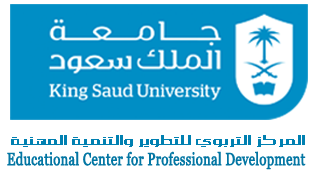
<style>
.page{position:relative;width:320px;height:180px;background:#ffffff}
.page>*{position:absolute;margin:0}
.t1{font:13.7px "LineMeskArabic2014";color:#0080b1;font-weight:bold;scale:1.45 1}
.t2{font:17.4px "Georgia";color:#0376a3;font-weight:bold;scale:0.74 1}
</style>
<div class="page">
<p class="t1" style="left:11px;top:135px;width:294px;height:12px">المركز التربوي للتطوير والتنمية المهنية</p>
<p class="t2" style="left:7px;top:151px;width:299px;height:19px">Educational Center for Professional Development</p>
</div>
